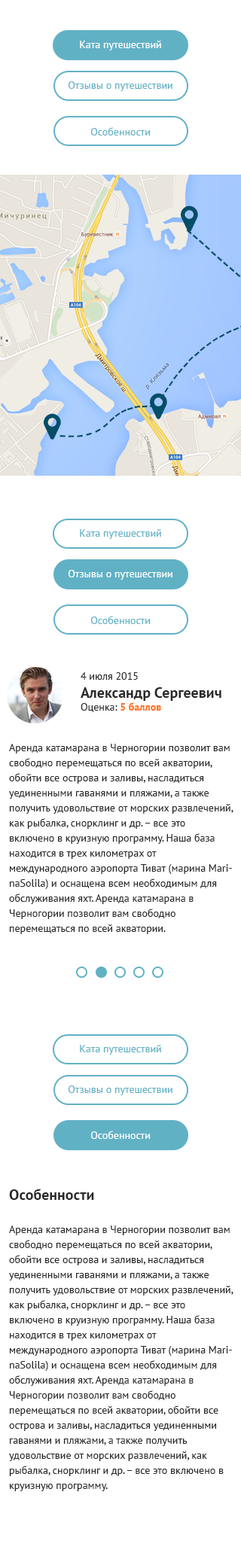
<style>
.page{position:relative;width:241px;height:1568px;background:#ffffff}
.page>*{position:absolute;margin:0}
.t1{font:10.5px "PTSans-Regular";color:#ffffff}
.t2{font:10.5px "PTSans-Regular";color:#61b1c5}
.t3{font:15.1px "PTSans-Bold";color:#282828}
.t4{font:10.5px "PTSans-Regular";color:#282828}
.t5{font:10.5px "PTSans-Bold";color:#ff7522}
.t6{font:10.5px/15.1px "PTSans-Regular";color:#282828}
</style>
<div class="page">
<p class="t1" style="left:80px;top:41px;width:81px;height:9px">Ката путешествий</p>
<p class="t2" style="left:68px;top:81px;width:104px;height:10px">Отзывы о путешествии</p>
<p class="t2" style="left:90px;top:127px;width:60px;height:8px">Особенности</p>
<p class="t2" style="left:80px;top:529px;width:81px;height:10px">Ката путешествий</p>
<p class="t1" style="left:68px;top:570px;width:104px;height:10px">Отзывы о путешествии</p>
<p class="t2" style="left:90px;top:616px;width:60px;height:8px">Особенности</p>
<p class="t3" style="left:81px;top:672px;width:140px;height:40px"><span class="t4">4 июля 2015<br></span>Александр Сергеевич<br><span class="t4">Оценка: </span><span class="t5">5 баллов</span></p>
<p class="t6" style="left:9px;top:744px;width:224px;height:190px">Аренда катамарана в Черногории позволит вам свободно перемещаться по всей акватории, обойти все острова и заливы, насладиться уединенными гаванями и пляжами, а также получить удовольствие от морских развлечений, как рыбалка, снорклинг и др. – все это включено в круизную программу. Наша база находится в трех километрах от международного аэропорта Тиват (марина MarinaSolila) и оснащена всем необходимым для обслуживания яхт. Аренда катамарана в Черногории позволит вам свободно перемещаться по всей акватории.</p>
<p class="t2" style="left:80px;top:1045px;width:81px;height:10px">Ката путешествий</p>
<p class="t2" style="left:68px;top:1085px;width:104px;height:10px">Отзывы о путешествии</p>
<p class="t1" style="left:90px;top:1131px;width:60px;height:8px">Особенности</p>
<p class="t6" style="left:9px;top:1189px;width:224px;height:302px"><span class="t3">Особенности<br><br></span>Аренда катамарана в Черногории позволит вам свободно перемещаться по всей акватории, обойти все острова и заливы, насладиться уединенными гаванями и пляжами, а также получить удовольствие от морских развлечений, как рыбалка, снорклинг и др. – все это включено в круизную программу. Наша база находится в трех километрах от международного аэропорта Тиват (марина MarinaSolila) и оснащена всем необходимым для обслуживания яхт. Аренда катамарана в Черногории позволит вам свободно перемещаться по всей акватории, обойти все острова и заливы, насладиться уединенными гаванями и пляжами, а также получить удовольствие от морских развлечений, как рыбалка, снорклинг и др. – все это включено в круизную программу.</p>
</div>
